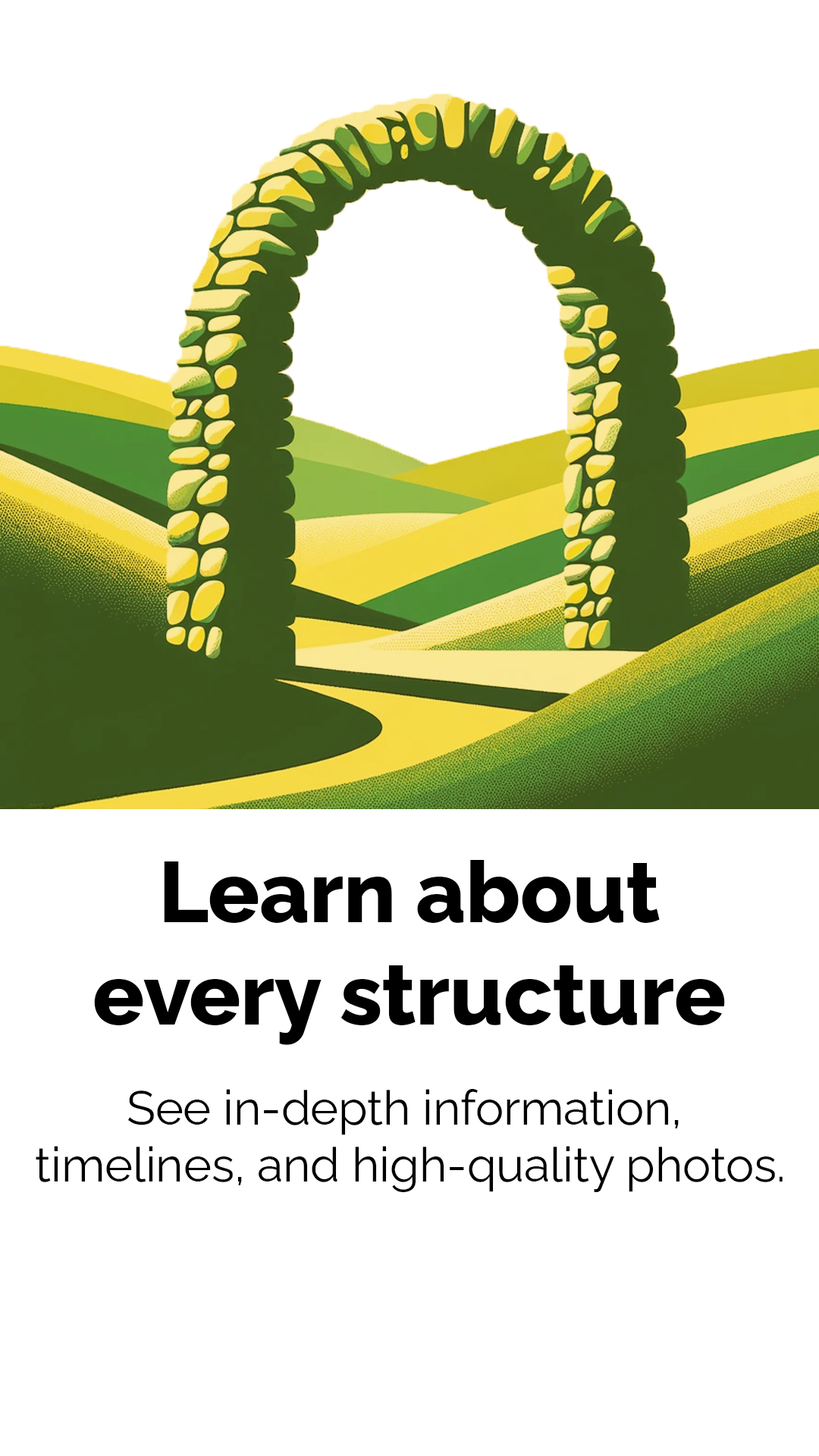
<style>
.page{position:relative;width:819px;height:1456px;background:#ffffff}
.page>*{position:absolute;margin:0}
.t1{font:85.3px "RalewayRoman-ExtraBold";color:#000000}
.t2{font:47.4px "RalewayRoman-Regular";color:#000000}
</style>
<div class="page">
<p class="t1" style="left:94px;top:860px;width:631px;height:185px;text-align:center">Learn about<br>every structure</p>
<p class="t2" style="left:36px;top:1089px;width:747px;height:104px;text-align:center">See in-depth information, <br>timelines, and high-quality photos.</p>
</div>
